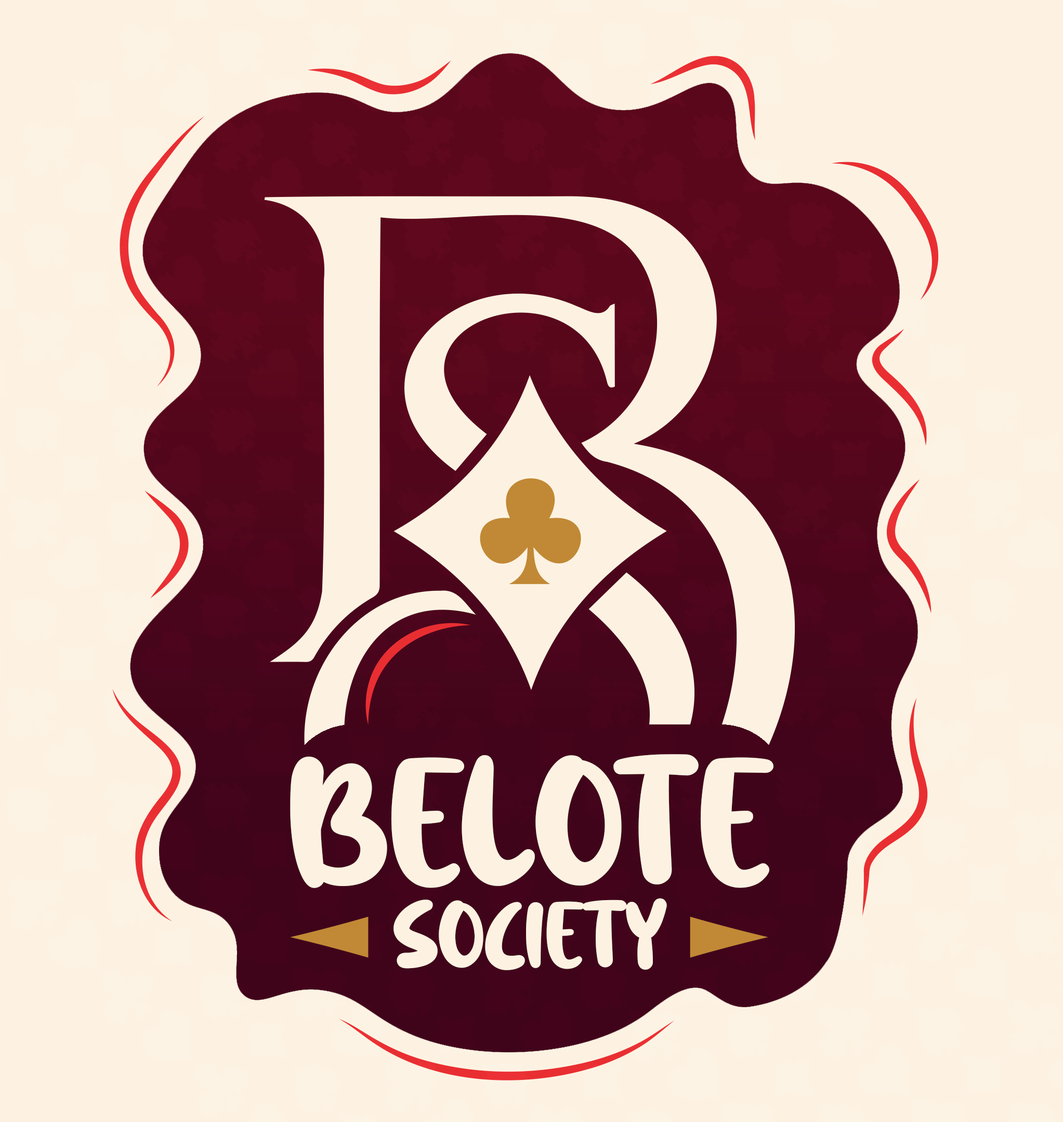
<style>
.page{position:relative;width:1063px;height:1122px;background:#fdf2e2}
.page>*{position:absolute;margin:0}
.t1{font:201.4px "LemonSliceRegular";color:#fdf2e2}
.t2{font:103.9px "LemonSliceRegular";color:#fdf2e2}
</style>
<div class="page">
<p class="t1" style="left:290px;top:754px;width:483px;height:134px">BELOTE</p>
<p class="t2" style="left:393px;top:898px;width:274px;height:72px">SOCIETY</p>
</div>
